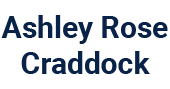
<style>
.page{position:relative;width:170px;height:89px;background:#ffffff}
.page>*{position:absolute;margin:0}
.t1{font:30px "Roboto-Bold";color:#092248}
</style>
<div class="page">
<p class="t1" style="left:1px;top:15px;width:167px;height:59px;text-align:center">Ashley Rose<br>Craddock</p>
</div>
